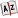
<style>
.page{position:relative;width:18px;height:18px;background:#ffffff}
.page>*{position:absolute;margin:0}
.t1{font:6.8px "MyriadPro-Regular";color:#000000}
</style>
<div class="page">
<p class="t1" style="left:4px;top:5px;width:4px;height:7px;rotate:-13deg">Å</p>
<p class="t1" style="left:10px;top:4px;width:5px;height:6px;rotate:-13deg">Z</p>
</div>
